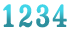
<style>
.page{position:relative;width:68px;height:31px;background:#ffffff}
.page>*{position:absolute;margin:0}
.t1{font:31px "SDKukdetopokki-bBd";letter-spacing:0.1em;scale:0.8 1}
.t2{font:31px "SDKukdetopokki-bBd";letter-spacing:0.1em;scale:0.79 1}
.t3{font:31px "SDKukdetopokki-bBd";letter-spacing:0.06em;scale:0.8 1}
.t4{font:31px "SDKukdetopokki-bBd";letter-spacing:0.08em;scale:0.8 1}
</style>
<div class="page">
<p class="t1" style="left:3px;top:4px;width:64px;height:24px">1<span class="t2">2</span><span class="t3">3</span><span class="t4">4</span></p>
</div>
